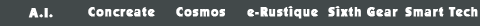
<style>
.page{position:relative;width:480px;height:26px;background:#42494a}
.page>*{position:absolute;margin:0}
.t1{font:13.1px "KabelITCbyBT-Ultra";letter-spacing:0.06em;color:#ffffff;font-weight:bold;scale:0.95 1}
</style>
<div class="page">
<p class="t1" style="left:247px;top:6px;width:71px;height:13px">e-Rustique</p>
<p class="t1" style="left:328px;top:6px;width:70px;height:11px">Sixth Gear</p>
<p class="t1" style="left:28px;top:8px;width:25px;height:10px">A.I.</p>
<p class="t1" style="left:88px;top:7px;width:67px;height:10px">Concreate</p>
<p class="t1" style="left:176px;top:7px;width:49px;height:10px">Cosmos</p>
<p class="t1" style="left:405px;top:7px;width:73px;height:10px">Smart Tech</p>
</div>
